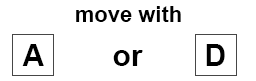
<style>
.page{position:relative;width:256px;height:81px;background:#ffffff}
.page>*{position:absolute;margin:0}
.t1{font:22px "Arial-BoldMT";color:#000000}
.t2{font:30px "Arial-BoldMT";color:#000000}
</style>
<div class="page">
<p class="t1" style="left:76px;top:6px;width:105px;height:16px">move with</p>
<p class="t2" style="left:22px;top:44px;width:22px;height:22px">A</p>
<p class="t2" style="left:113px;top:50px;width:30px;height:16px">or</p>
<p class="t2" style="left:206px;top:44px;width:19px;height:22px">D</p>
</div>
